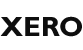
<style>
.page{position:relative;width:83px;height:50px;background:#ffffff}
.page>*{position:absolute;margin:0}
.t1{font:27.8px "GillSansMT-Bold";color:#0e0e0e}
</style>
<div class="page">
<p class="t1" style="left:0px;top:16px;width:82px;height:21px">XERO</p>
</div>
